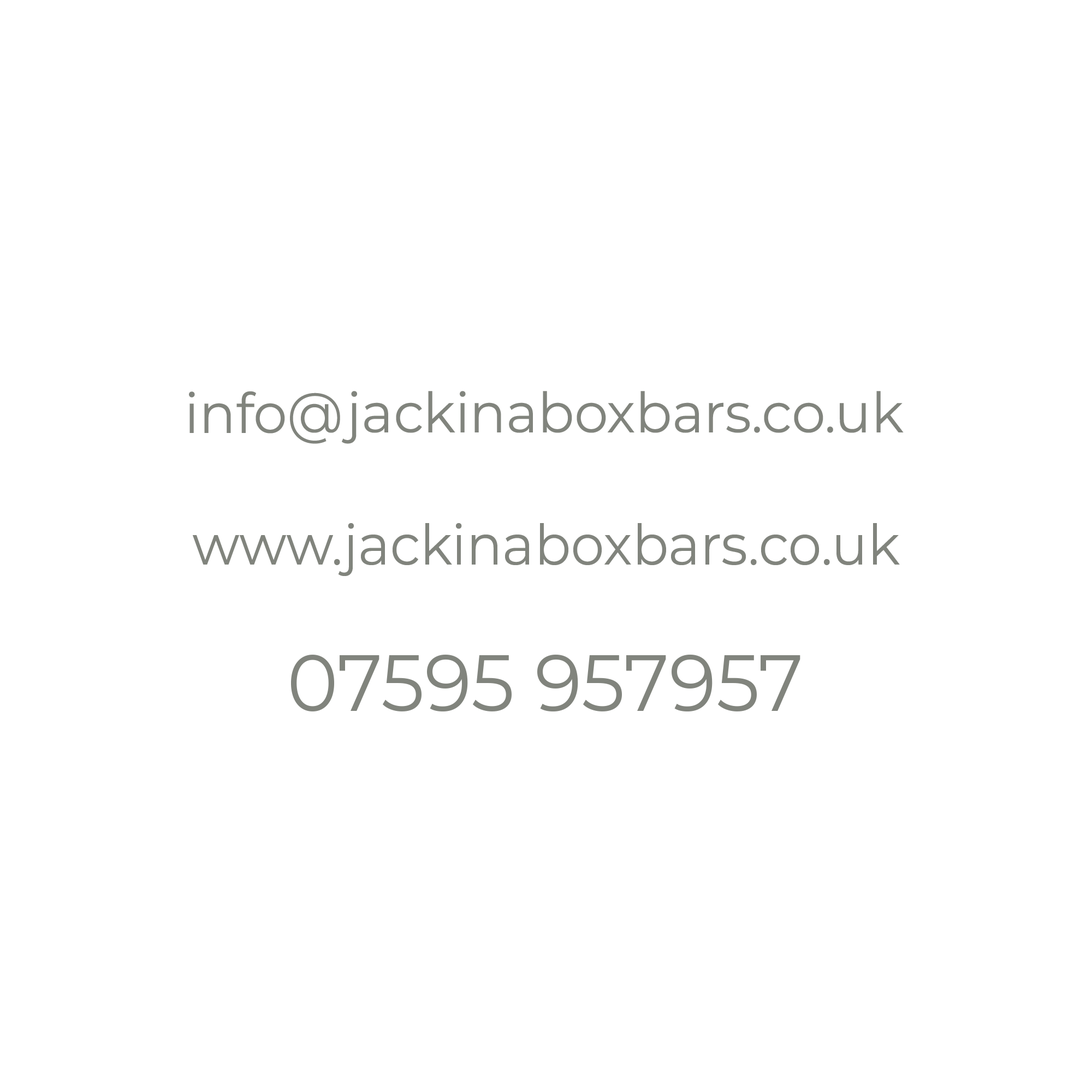
<style>
.page{position:relative;width:1092px;height:1092px;background:#ffffff}
.page>*{position:absolute;margin:0}
.t1{font:95.5px "Montserrat-Regular";color:#81847d;scale:0.97 1}
.t2{font:136.5px "Montserrat-Regular";color:#81847d;scale:0.97 1}
</style>
<div class="page">
<p class="t1" style="left:189px;top:391px;width:715px;height:53px">info@jackinaboxbars.co.uk</p>
<p class="t1" style="left:193px;top:523px;width:707px;height:53px">www.jackinaboxbars.co.uk</p>
<p class="t2" style="left:291px;top:654px;width:509px;height:58px">07595 957957</p>
</div>
